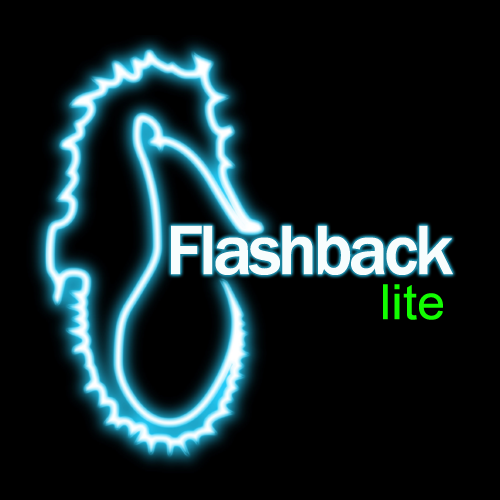
<style>
.page{position:relative;width:500px;height:500px;background:#000000}
.page>*{position:absolute;margin:0}
.t1{font:72px "FranklinGothic-Medium";letter-spacing:-0.075em;color:#f7fdfd;font-weight:bold}
.t2{font:48px "ArialMT";letter-spacing:-0.01em;color:#12fe00;font-weight:bold}
</style>
<div class="page">
<p class="t1" style="left:171px;top:225px;width:282px;height:50px">Flashback</p>
<p class="t2" style="left:383px;top:284px;width:60px;height:36px">lite</p>
</div>
